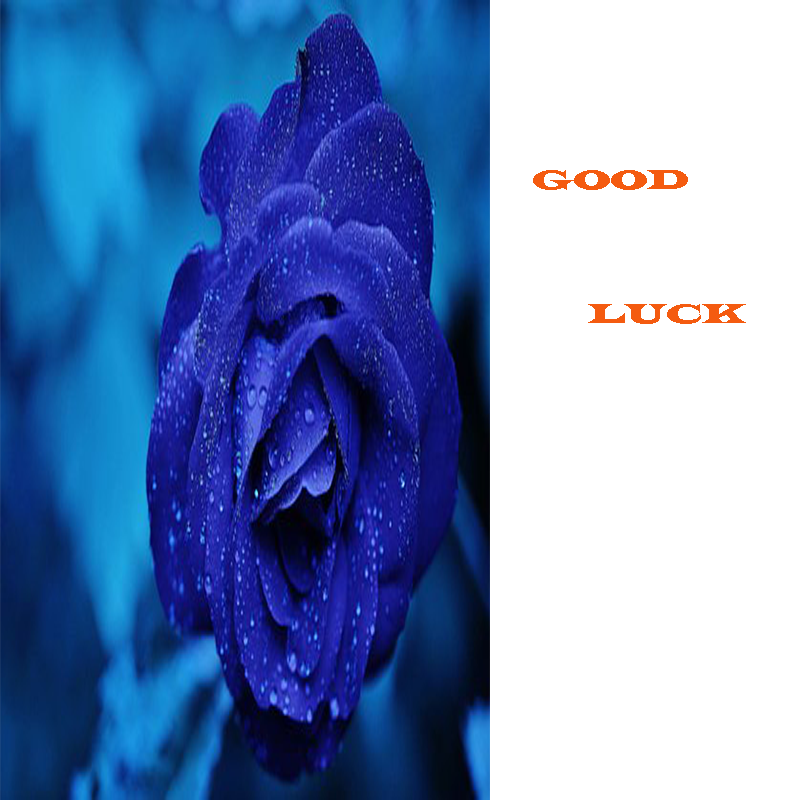
<style>
.page{position:relative;width:800px;height:800px;background:#ffffff}
.page>*{position:absolute;margin:0}
.t1{font:27.9px "LatinWide";color:#f45b10}
</style>
<div class="page">
<p class="t1" style="left:533px;top:170px;width:213px;height:154px">GOOD<br><br><br><br>       LUCK</p>
</div>
